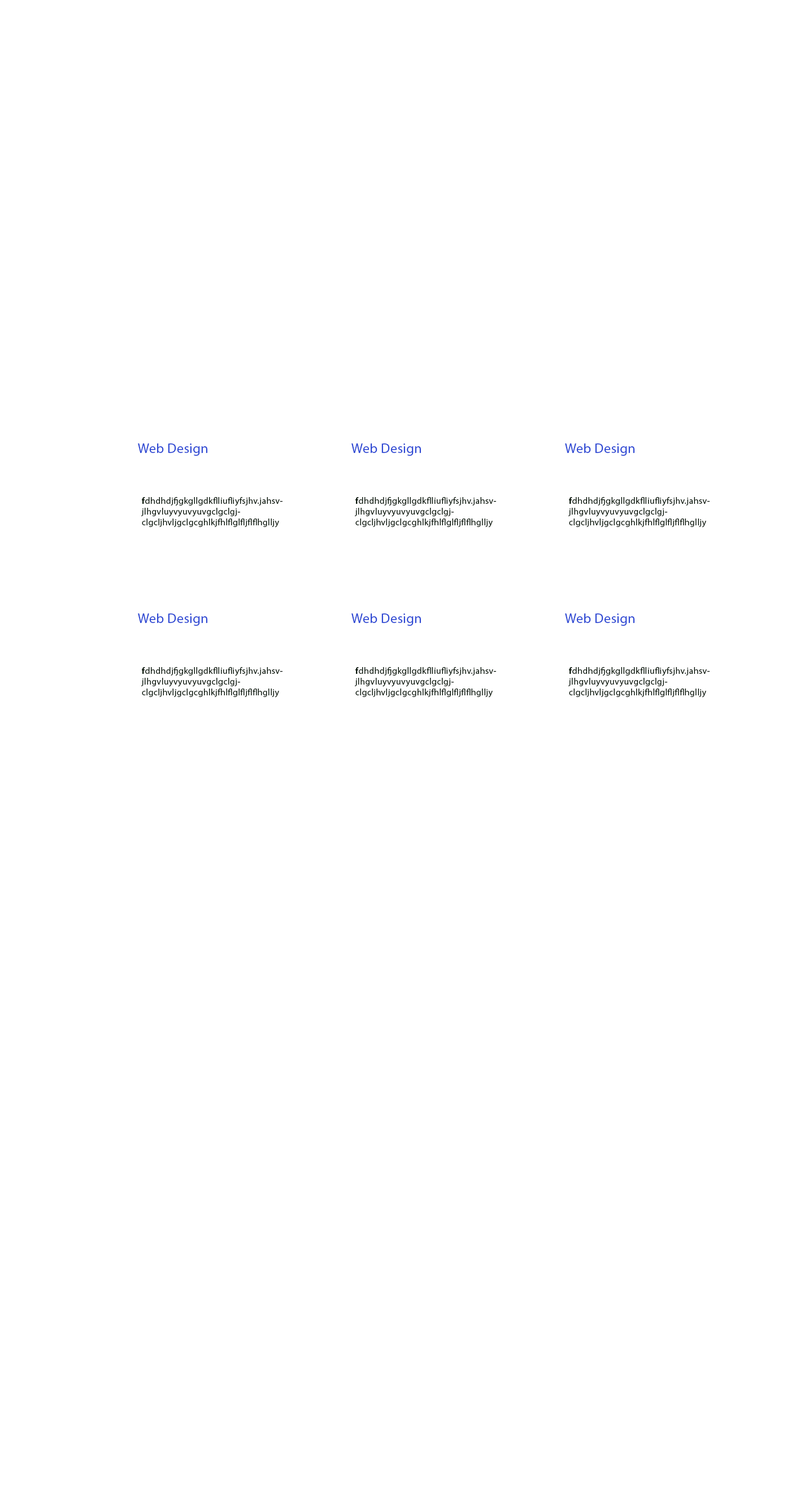
<style>
.page{position:relative;width:791px;height:1507px;background:#ffffff}
.page>*{position:absolute;margin:0}
.t1{font:13.6px "MyriadPro-Regular";letter-spacing:0.02em;color:#2f4ad4}
.t2{font:9px "MyriadPro-Regular";letter-spacing:0.02em;color:#0b180c}
.t3{font:9px "MyriadPro-Bold";letter-spacing:0.02em;color:#0b180c}
</style>
<div class="page">
<p class="t1" style="left:138px;top:444px;width:69px;height:12px">Web Design</p>
<p class="t1" style="left:351px;top:444px;width:70px;height:12px">Web Design</p>
<p class="t1" style="left:565px;top:444px;width:70px;height:12px">Web Design</p>
<p class="t2" style="left:141px;top:497px;width:142px;height:31px"><span class="t3">f</span>dhdhdjfjgkgllgdkflliufliyfsjhv.jahsvjlhgvluyvyuvyuvgclgclgjclgcljhvljgclgcghlkjfhlflglfljflflhglljy</p>
<p class="t2" style="left:355px;top:497px;width:141px;height:31px"><span class="t3">f</span>dhdhdjfjgkgllgdkflliufliyfsjhv.jahsvjlhgvluyvyuvyuvgclgclgjclgcljhvljgclgcghlkjfhlflglfljflflhglljy</p>
<p class="t2" style="left:568px;top:497px;width:142px;height:31px"><span class="t3">f</span>dhdhdjfjgkgllgdkflliufliyfsjhv.jahsvjlhgvluyvyuvyuvgclgclgjclgcljhvljgclgcghlkjfhlflglfljflflhglljy</p>
<p class="t1" style="left:138px;top:614px;width:69px;height:12px">Web Design</p>
<p class="t1" style="left:351px;top:614px;width:70px;height:12px">Web Design</p>
<p class="t1" style="left:565px;top:614px;width:70px;height:12px">Web Design</p>
<p class="t2" style="left:141px;top:667px;width:142px;height:31px"><span class="t3">f</span>dhdhdjfjgkgllgdkflliufliyfsjhv.jahsvjlhgvluyvyuvyuvgclgclgjclgcljhvljgclgcghlkjfhlflglfljflflhglljy</p>
<p class="t2" style="left:355px;top:667px;width:141px;height:31px"><span class="t3">f</span>dhdhdjfjgkgllgdkflliufliyfsjhv.jahsvjlhgvluyvyuvyuvgclgclgjclgcljhvljgclgcghlkjfhlflglfljflflhglljy</p>
<p class="t2" style="left:568px;top:667px;width:142px;height:31px"><span class="t3">f</span>dhdhdjfjgkgllgdkflliufliyfsjhv.jahsvjlhgvluyvyuvyuvgclgclgjclgcljhvljgclgcghlkjfhlflglfljflflhglljy</p>
</div>
